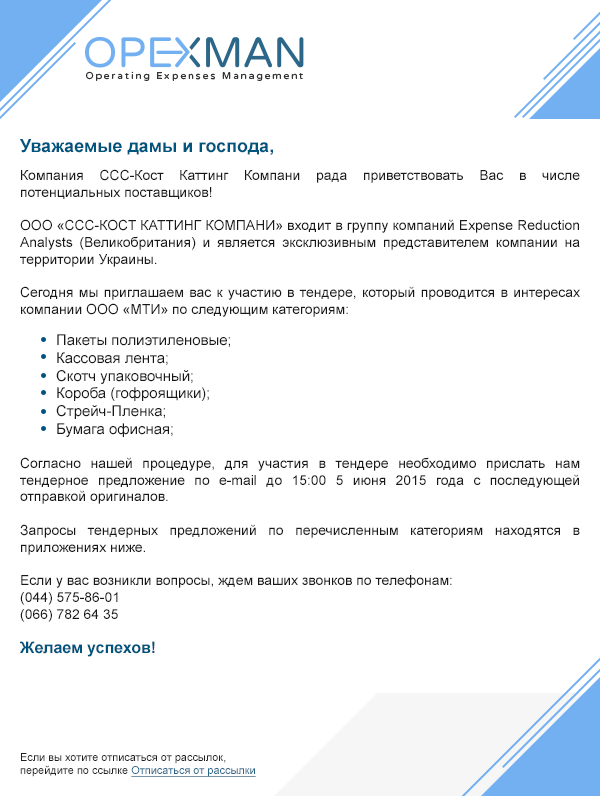
<style>
.page{position:relative;width:600px;height:796px;background:#ffffff}
.page>*{position:absolute;margin:0}
.t1{font:17.9px "Arial-BoldMT";color:#00557f}
.t2{font:13.9px "ArialMT";color:#181818}
.t3{font:14.9px "ArialMT";color:#181818}
.t4{font:15.9px "Arial-BoldMT";color:#00557f}
.t5{font:11px "ArialMT";color:#212121}
.t6{font:11px "ArialMT";color:#2c6789;text-decoration:underline}
</style>
<div class="page">
<p class="t1" style="left:20px;top:139px;width:253px;height:16px">Уважаемые дамы и господа,</p>
<p class="t2" style="left:20px;top:169px;width:560px;height:148px;text-align:justify">Компания ССС-Кост Каттинг Компани рада приветствовать Вас в числе потенциальных поставщиков! <br><br>ООО «ССС-КОСТ КАТТИНГ КОМПАНИ» входит в группу компаний Expense Reduction Analysts (Великобритания) и является эксклюзивным представителем компании на территории Украины.<br><br>Сегодня мы приглашаем вас к участию в тендере, который проводится в интересах компании ООО «МТИ» по следующим категориям:</p>
<p class="t3" style="left:56px;top:334px;width:174px;height:103px">Пакеты полиэтиленовые; <br>Кассовая лента; <br>Скотч упаковочный;<br>Короба (гофроящики);<br>Стрейч-Пленка;<br>Бумага офисная;</p>
<p class="t2" style="left:20px;top:457px;width:560px;height:165px;text-align:justify">Согласно нашей процедуре, для участия в тендере необходимо прислать нам тендерное предложение по e-mail до 15:00 5 июня 2015 года с последующей отправкой оригиналов.<br> <br>Запросы тендерных предложений по перечисленным категориям находятся в приложениях ниже.<br><br>Если у вас возникли вопросы, ждем ваших звонков по телефонам:<br>(044) 575-86-01<br>(066) 782 64 35</p>
<p class="t4" style="left:20px;top:641px;width:135px;height:16px">Желаем успехов!</p>
<p class="t5" style="left:20px;top:753px;width:236px;height:24px;text-align:justify">Если вы хотите отписаться от рассылок, <br>перейдите по ссылке <span class="t6">Отписаться от рассылки</span></p>
</div>
